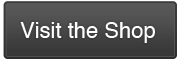
<style>
.page{position:relative;width:180px;height:60px}
.page>*{position:absolute;margin:0}
.t1{font:22px "Helvetica";color:#ffffff}
</style>
<div class="page">
<p class="t1" style="left:20px;top:22px;width:135px;height:21px">Visit the Shop</p>
</div>
